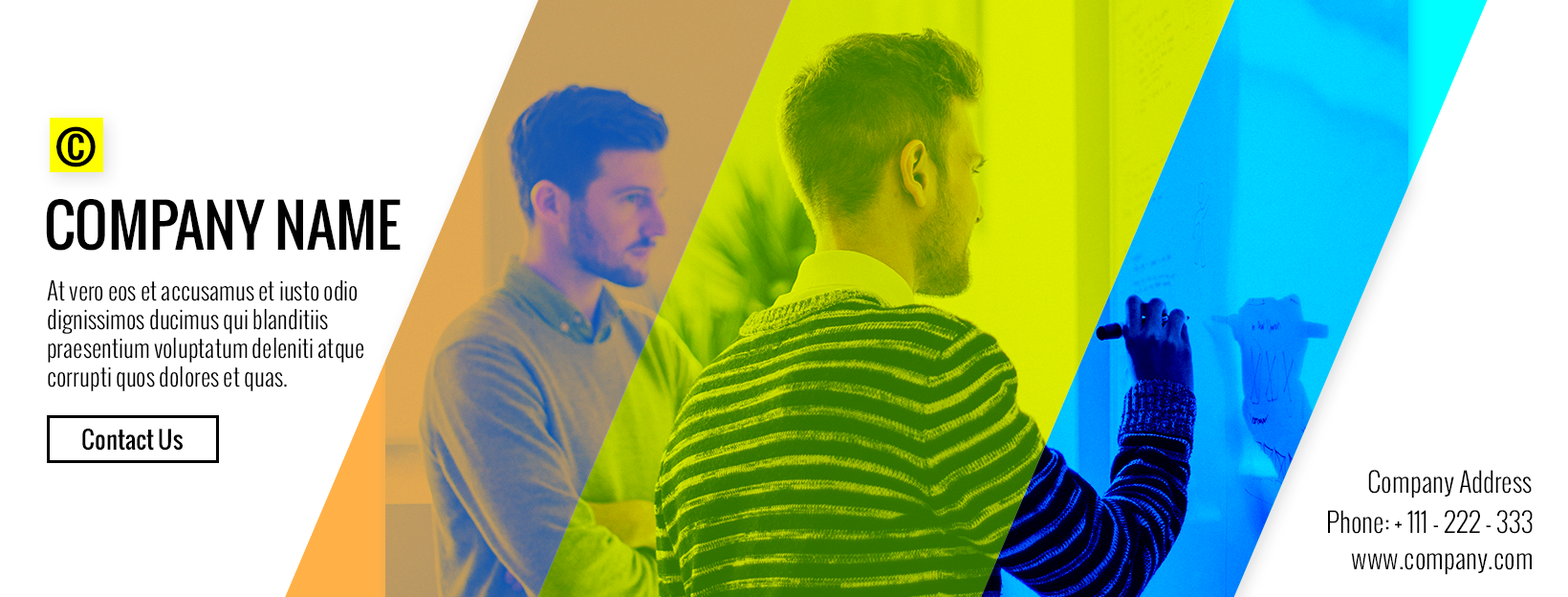
<style>
.page{position:relative;width:1568px;height:597px;background:#ffffff}
.page>*{position:absolute;margin:0}
.t1{font:57.4px "Oswald";color:#000000}
.t2{font:57.4px "Oswald";color:#000000;text-transform:uppercase}
.t3{font:23.9px/28.7px "Oswald-Light";color:#000000}
.t4{font:23.9px "Oswald";color:#000000}
.t5{font:26.8px "Oswald-Light";color:#000000}
</style>
<div class="page">
<p class="t1" style="left:56px;top:126px;width:40px;height:41px">©</p>
<p class="t2" style="left:46px;top:199px;width:355px;height:51px">Company Name</p>
<p class="t3" style="left:47px;top:279px;width:317px;height:112px">At vero eos et accusamus et iusto odio dignissimos ducimus qui blanditiis praesentium voluptatum deleniti atque corrupti quos dolores et quas.</p>
<p class="t4" style="left:82px;top:428px;width:101px;height:22px">Contact Us</p>
<p class="t5" style="left:1368px;top:469px;width:164px;height:29px">Company Address</p>
<p class="t5" style="left:1328px;top:510px;width:205px;height:24px">Phone: + 111 - 222 - 333</p>
<p class="t5" style="left:1351px;top:553px;width:181px;height:22px">www.company.com</p>
</div>
